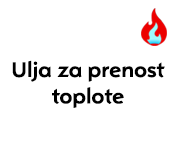
<style>
.page{position:relative;width:175px;height:150px;background:#ffffff}
.page>*{position:absolute;margin:0}
.t1{font:22px "OpelSans-Bold";color:#000000}
</style>
<div class="page">
<p class="t1" style="left:12px;top:60px;width:153px;height:48px;text-align:center">Ulja za prenost<br>toplote</p>
</div>
